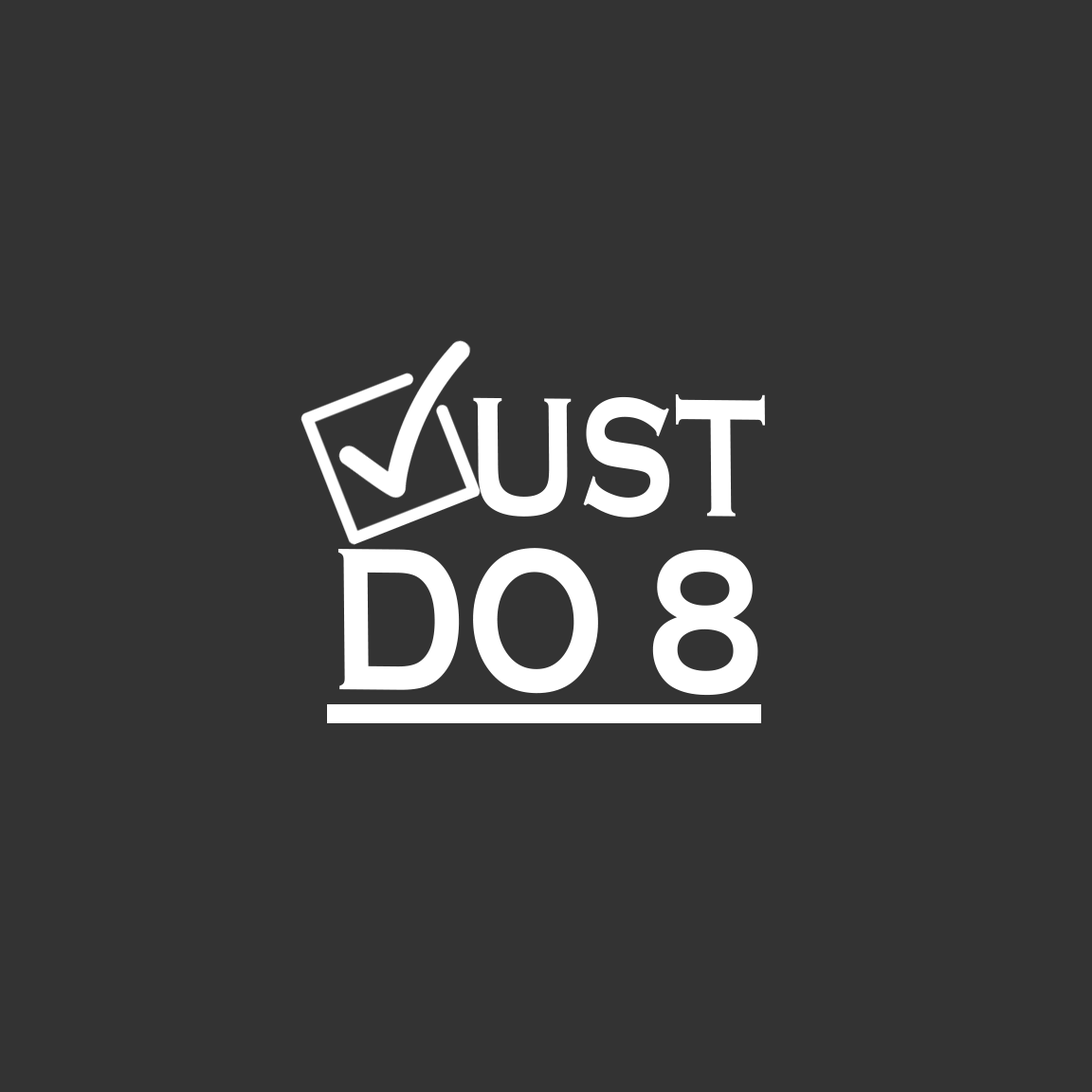
<style>
.page{position:relative;width:1092px;height:1092px;background:#333333}
.page>*{position:absolute;margin:0}
.t1{font:173.7px "CopperplateGothic-Bold";color:#ffffff;scale:0.78 1}
.t2{font:210.5px "CopperplateGothic-Bold";color:#ffffff;scale:0.78 1}
</style>
<div class="page">
<p class="t1" style="left:473px;top:394px;width:292px;height:124px;rotate:1deg">UST</p>
<p class="t2" style="left:337px;top:548px;width:421px;height:148px;rotate:1deg">DO 8</p>
</div>
